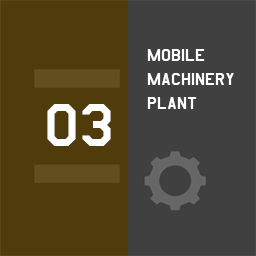
<style>
.page{position:relative;width:256px;height:256px;background:#404040}
.page>*{position:absolute;margin:0}
.t1{font:20px "AmarilloUSAF";color:#ffffff}
.t2{font:70px "AmarilloUSAF";color:#ffffff}
</style>
<div class="page">
<p class="t1" style="left:147px;top:49px;width:87px;height:60px">mobile<br>machinery<br>plant</p>
<p class="t2" style="left:47px;top:104px;width:64px;height:42px">03</p>
</div>
